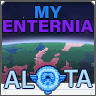
<style>
.page{position:relative;width:96px;height:96px}
.page>*{position:absolute;margin:0}
.t1{font:17.5px/14.6px "AcuminConcept_760.000wght_102.000wdth";color:#8020f0}
.t2{font:17.5px/14.6px "AcuminConcept_760.000wght_102.000wdth";color:#2080f0}
.t3{font:25px "AcuminConcept_589.000wght_96.000wdth";color:#b0e0fc}
</style>
<div class="page">
<p class="t1" style="left:3px;top:5px;width:91px;height:27px;text-align:center"><span class="t2">MY<br></span>ENTERNIA</p>
<p class="t3" style="left:4px;top:70px;width:30px;height:18px">AL</p>
<p class="t3" style="left:64px;top:69px;width:28px;height:18px">TA</p>
</div>
